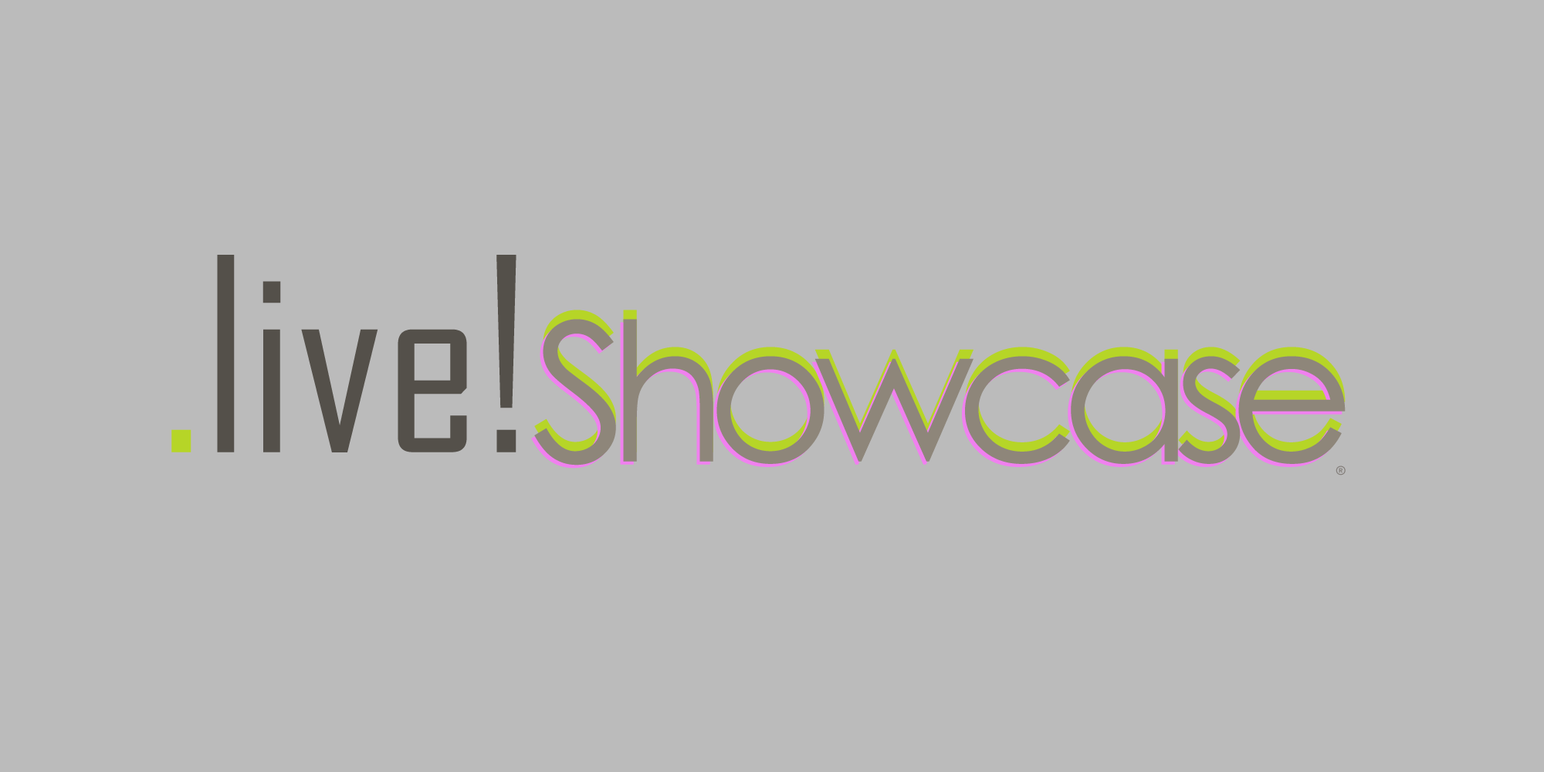
<style>
.page{position:relative;width:1544px;height:772px;background:#bbbbbb}
.page>*{position:absolute;margin:0}
.t1{font:193px "CenturyGothic";letter-spacing:-0.1em;color:#b6d527}
.t2{font:258.1px "AgencyFB-Reg";color:#b6d527}
.t3{font:258.1px "AgencyFB-Reg";color:#54504a}
.t4{font:193px "CenturyGothic";letter-spacing:-0.1em;color:#8e867a}
.t5{font:19.3px "Corbel";letter-spacing:-0.075em;color:#847f7b}
</style>
<div class="page">
<p class="t1" style="left:171px;top:255px;width:1175px;height:201px"><span class="t2">.</span><span class="t3">live!</span>Showcase</p>
<p class="t4" style="left:531px;top:322px;width:812px;height:147px">Showcase</p>
<p class="t4" style="left:534px;top:319px;width:812px;height:147px">Showcase</p>
<p class="t5" style="left:1336px;top:466px;width:10px;height:10px">®</p>
</div>
